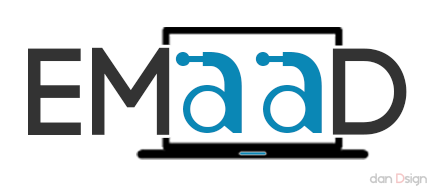
<style>
.page{position:relative;width:433px;height:186px;background:#ffffff}
.page>*{position:absolute;margin:0}
.t1{font:124px "Code-Pro-Demo";letter-spacing:-0.025em;color:#333333}
.t2{font:124px "Code-Pro-Demo";color:#333333}
.t3{font:158px "Circuitry";color:#0a87b5}
.t4{font:14px "BlissfulThinking";color:#c8c8c8}
</style>
<div class="page">
<p class="t1" style="left:28px;top:47px;width:379px;height:88px"><span class="t2">E</span>M     D</p>
<p class="t3" style="left:175px;top:52px;width:147px;height:81px">aa</p>
<p class="t4" style="left:369px;top:173px;width:58px;height:13px">dan Dsign</p>
</div>
